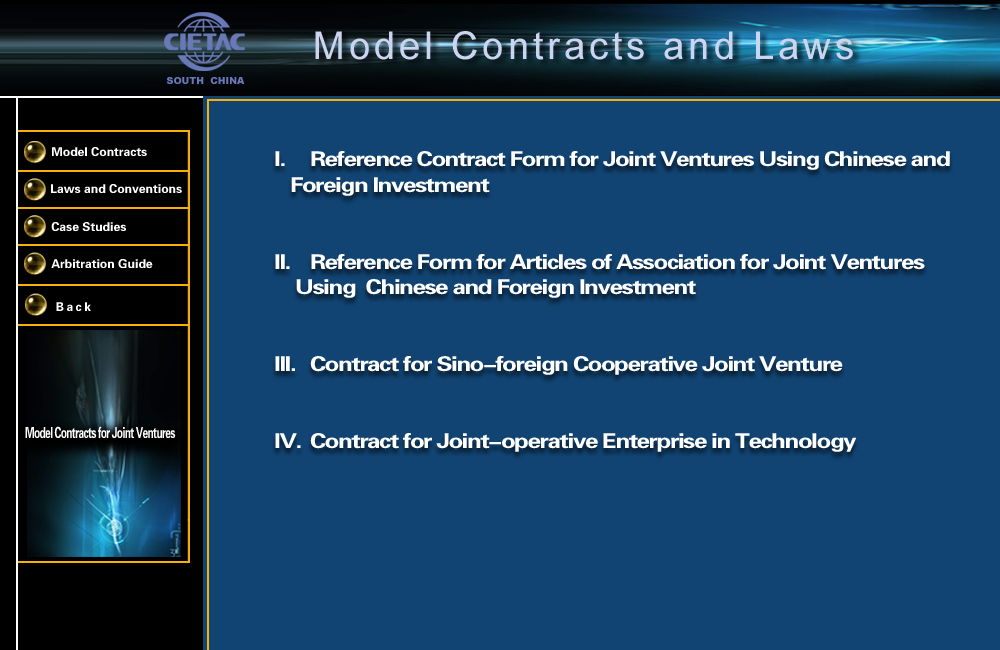
<style>
.page{position:relative;width:1000px;height:650px;background:#114473}
.page>*{position:absolute;margin:0}
.t1{font:12.2px "FZDHTJW--GB1-0";color:#ffffff}
.t2{font:20.2px/25.7px "FZDHTJW--GB1-0";letter-spacing:-0.06em;color:#ffffff;scale:1.2 1}
.t3{font:15.3px "FZDHTJW--GB1-0";letter-spacing:-0.06em;color:#ffffff;scale:0.66 1}
</style>
<div class="page">
<p class="t1" style="left:52px;top:147px;width:95px;height:9px">Model Contracts</p>
<p class="t2" style="left:275px;top:151px;width:675px;height:301px">I. Reference Contract Form for Joint Ventures Using Chinese and<br>   Foreign Investment<br><br><br>II. Reference Form for Articles of Association for Joint Ventures<br>    Using  Chinese and Foreign Investment <br><br><br>III. Contract for Sino-foreign Cooperative Joint Venture<br><br><br>IV. Contract for Joint-operative Enterprise in Technology</p>
<p class="t1" style="left:51px;top:184px;width:131px;height:9px">Laws and Conventions</p>
<p class="t1" style="left:51px;top:222px;width:75px;height:9px">Case Studies</p>
<p class="t1" style="left:51px;top:259px;width:102px;height:9px">Arbitration Guide</p>
<p class="t3" style="left:25px;top:426px;width:151px;height:12px">Model Contracts for Joint Ventures</p>
</div>
